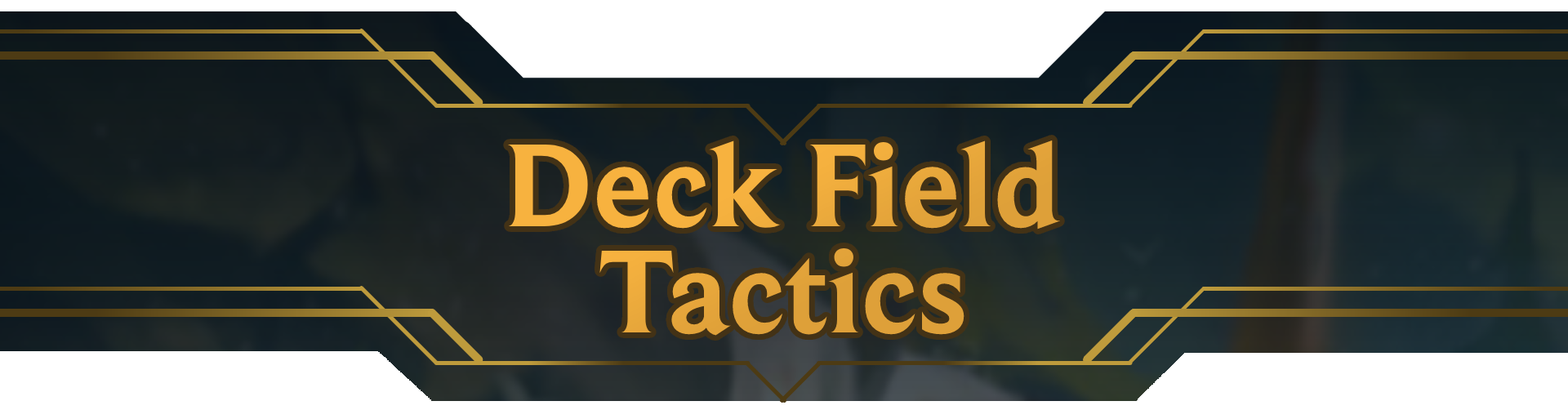
<style>
.page{position:relative;width:1568px;height:410px}
.page>*{position:absolute;margin:0}
.t1{font:122.5px/106.2px "BeaufortforLOL-Bold";color:#e8a83b}
</style>
<div class="page">
<p class="t1" style="left:507px;top:140px;width:554px;height:196px;text-align:center">Deck Field<br>Tactics</p>
</div>
